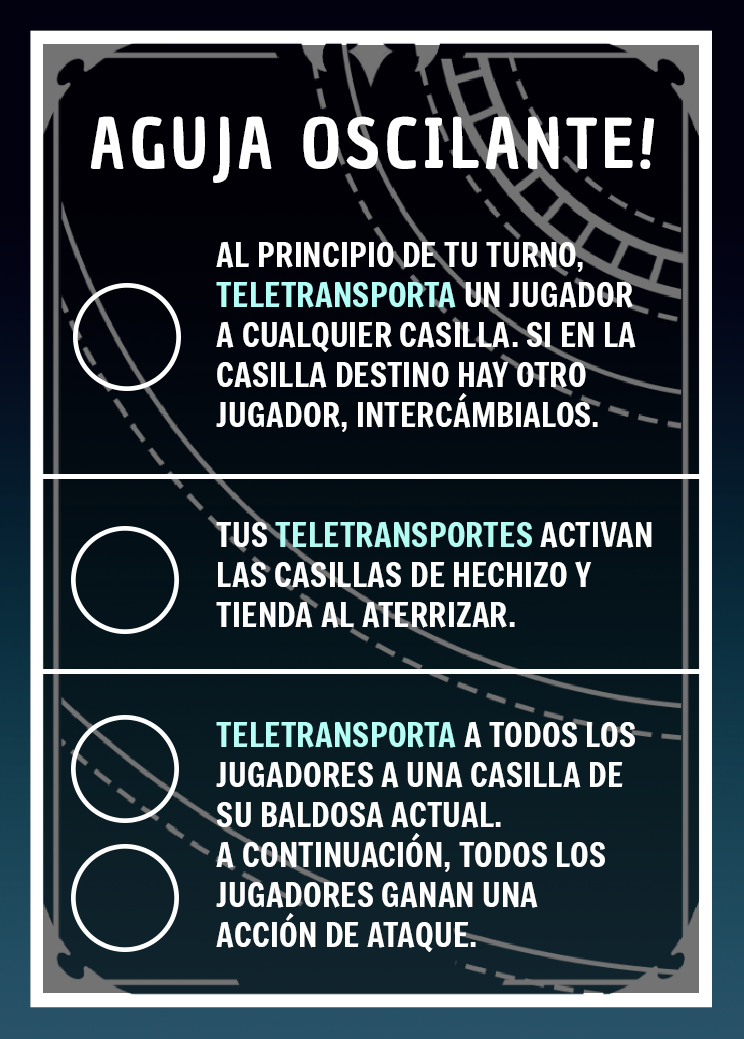
<style>
.page{position:relative;width:744px;height:1039px}
.page>*{position:absolute;margin:0}
.t1{font:66.7px "ChauPhilomeneOne-Regular";letter-spacing:0.075em;color:#ffffff}
.t2{font:33.3px "Freeman-Regular";color:#ffffff}
.t3{font:33.3px "Freeman-Regular";color:#b2fff7}
.t4{font:33.3px "Freeman-Regular";color:#b2fcf4}
.t5{font:33.3px "Freeman-Regular";color:#b5fff7}
</style>
<div class="page">
<p class="t1" style="left:90px;top:116px;width:565px;height:67px">AGUJA OSCILANTE!</p>
<p class="t2" style="left:216px;top:241px;width:420px;height:191px">AL PRINCIPIO DE TU TURNO, <span class="t3">TELETRANSPORTA </span>UN JUGADOR  A CUALQUIER CASILLA. SI EN LA CASILLA DESTINO HAY OTRO JUGADOR, INTERCÁMBIALOS.</p>
<p class="t2" style="left:216px;top:521px;width:436px;height:107px">TUS <span class="t4">TELETRANSPORTES </span>ACTIVAN LAS CASILLAS DE HECHIZO Y TIENDA AL ATERRIZAR.</p>
<p class="t2" style="left:216px;top:721px;width:419px;height:231px"><span class="t5">TELETRANSPORTA </span>A TODOS LOS JUGADORES A UNA CASILLA DE SU BALDOSA ACTUAL. <br>A CONTINUACIÓN, TODOS LOS JUGADORES GANAN UNA <br>ACCIÓN DE ATAQUE.</p>
</div>
